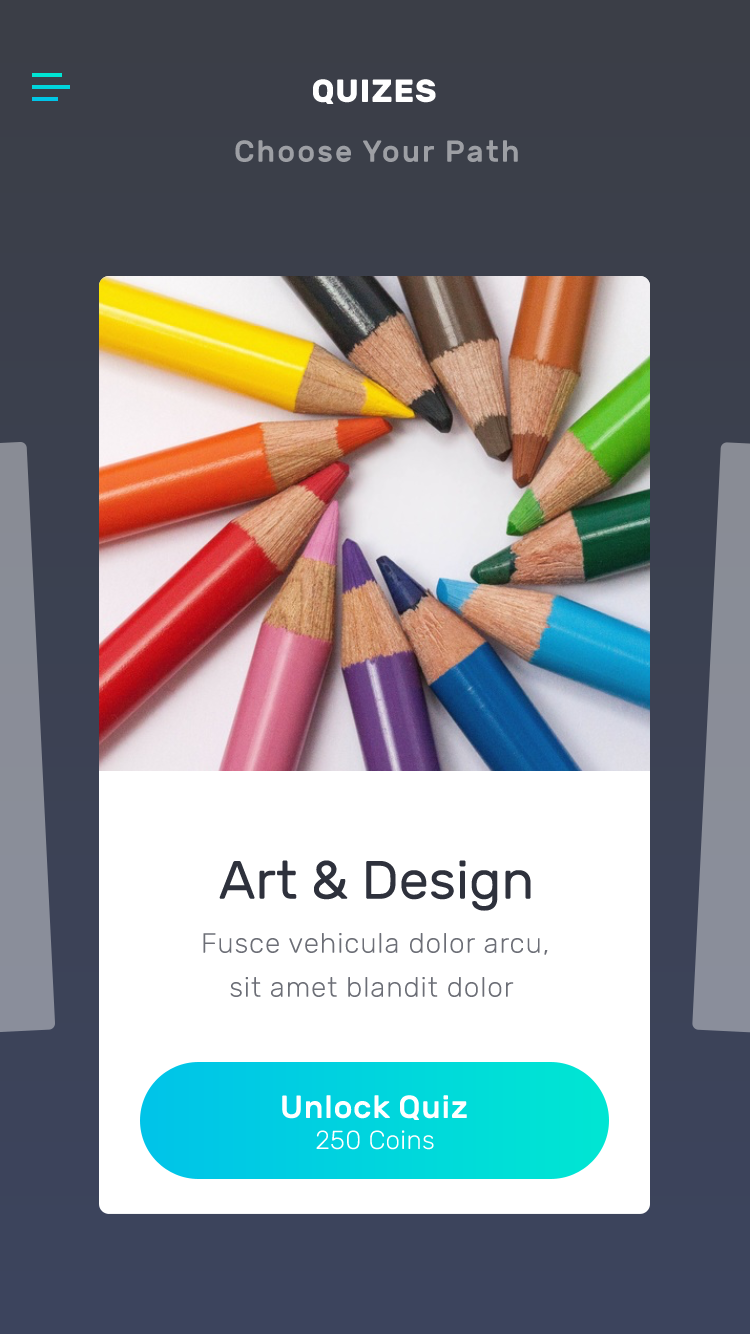
<style>
.page{position:relative;width:750px;height:1334px}
.page>*{position:absolute;margin:0}
.t1{font:32px "Rubik-Bold";letter-spacing:0.03em;color:#ffffff}
.t2{font:30px "Rubik-Medium";letter-spacing:0.07em;color:#9d9fa4}
.t3{font:54px "Rubik-Regular";color:#2e313c}
.t4{font:28px/44px "Rubik-Light";letter-spacing:0.03em;color:#6c6e76}
.t5{font:32px "Rubik-Medium";letter-spacing:0.02em;color:#ffffff}
.t6{font:26px "Rubik-Light";letter-spacing:0.01em;color:#ffffff}
</style>
<div class="page">
<p class="t1" style="left:313px;top:79px;width:123px;height:25px">QUIZES</p>
<p class="t2" style="left:235px;top:140px;width:283px;height:22px">Choose Your Path</p>
<p class="t3" style="left:219px;top:860px;width:312px;height:51px">Art &amp; Design</p>
<p class="t4" style="left:203px;top:933px;width:345px;height:64px;text-align:center">Fusce vehicula dolor arcu,<br>sit amet blandit dolor</p>
<p class="t5" style="left:282px;top:1095px;width:185px;height:25px">Unlock Quiz</p>
<p class="t6" style="left:316px;top:1130px;width:118px;height:20px">250 Coins</p>
</div>
